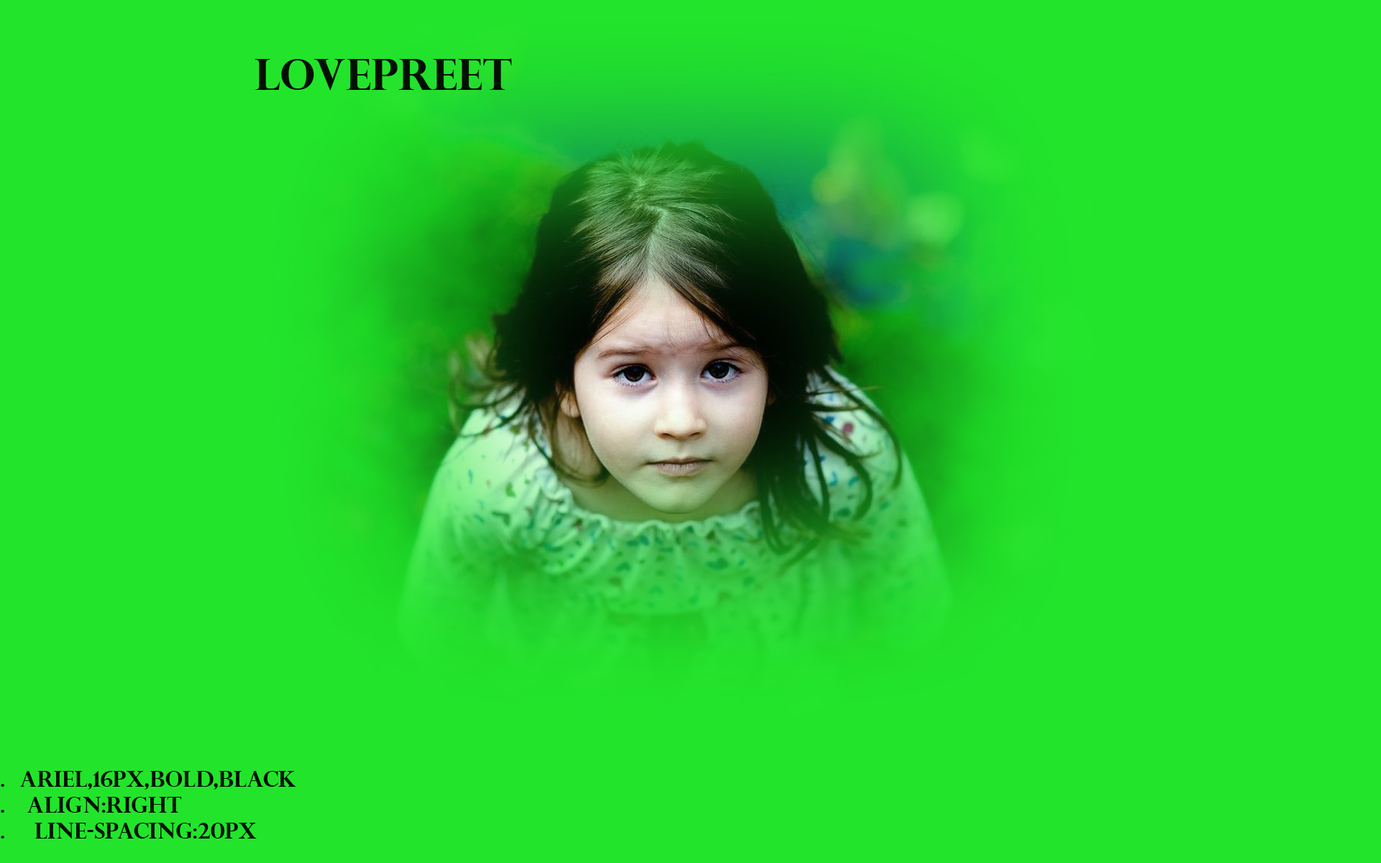
<style>
.page{position:relative;width:1381px;height:863px;background:#22e52b}
.page>*{position:absolute;margin:0}
.t1{font:43.2px "PerpetuaTitlingMT-Bold";color:#021002}
.t2{font:21.6px "PerpetuaTitlingMT-Bold";color:#021002}
</style>
<div class="page">
<p class="t1" style="left:255px;top:58px;width:257px;height:32px">lovepreet</p>
<p class="t2" style="left:1px;top:771px;width:295px;height:68px">.  ariel,16px,bold,black<br>.   align:right <br>.    line-spacing:20px</p>
</div>
